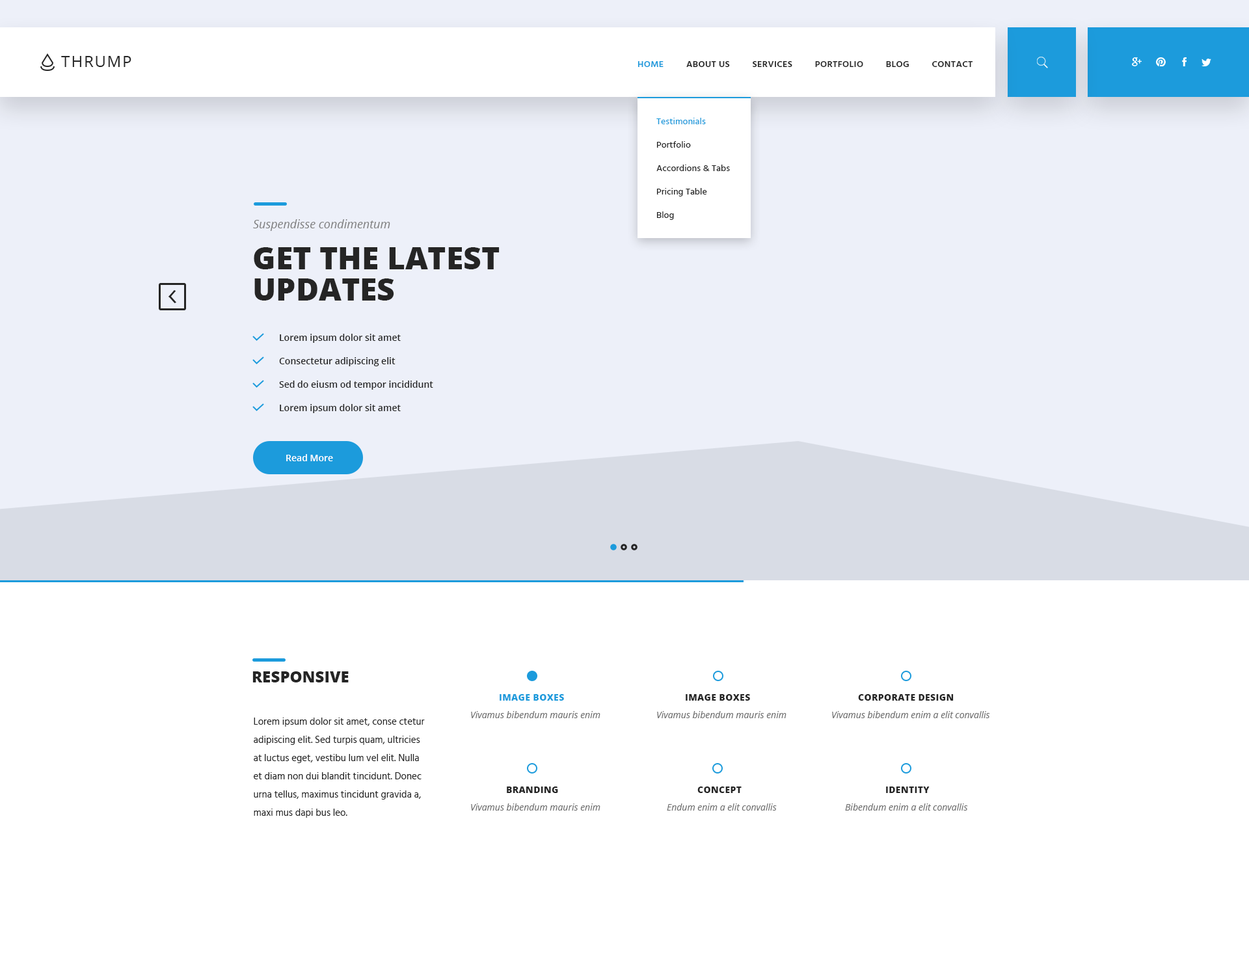
<style>
.page{position:relative;width:1249px;height:955px;background:#ffffff}
.page>*{position:absolute;margin:0}
.t1{font:15.6px "OpenSans";letter-spacing:0.075em;color:#252525;text-transform:uppercase}
.t2{font:9.1px "Hind-Semibold";letter-spacing:0.025em;color:#252525;text-transform:uppercase}
.t3{font:9.1px "Hind-Semibold";letter-spacing:0.025em;color:#1c9bdc;text-transform:uppercase}
.t4{font:9.1px/23.4px "Hind-Medium";color:#252525}
.t5{font:9.1px/23.4px "Hind-Medium";color:#1c9bdc}
.t6{font:11.7px "OpenSans-Italic";color:#7d7d7d}
.t7{font:31.2px/31.2px "OpenSans-Extrabold";color:#252525;text-transform:uppercase}
.t8{font:9.1px/23.4px "OpenSans-Semibold";color:#252525}
.t9{font:9.1px "OpenSans-Semibold";color:#ffffff}
.t10{font:15.6px "OpenSans-Extrabold";color:#252525;text-transform:uppercase}
.t11{font:9.1px "OpenSans-Extrabold";letter-spacing:0.025em;color:#1c9bdc;text-transform:uppercase}
.t12{font:9.1px "OpenSans-Extrabold";letter-spacing:0.025em;color:#252525;text-transform:uppercase}
.t13{font:9.1px "OpenSans-Italic";color:#6f6f6f}
.t14{font:9.8px/18.2px "Hind-Regular";color:#252525}
.t15{font:9.8px/17.6px "Hind-Regular";color:#252525}
</style>
<div class="page">
<p class="t1" style="left:61px;top:56px;width:70px;height:11px">Thrump</p>
<p class="t2" style="left:637px;top:61px;width:336px;height:6px"><span class="t3">Home</span>         About Us         Services         Portfolio         Blog         Contact</p>
<p class="t4" style="left:656px;top:118px;width:74px;height:102px"><span class="t5">Testimonials<br></span>Portfolio<br>Accordions &amp; Tabs<br>Pricing Table<br>Blog</p>
<p class="t6" style="left:253px;top:219px;width:137px;height:12px">Suspendisse condimentum</p>
<p class="t7" style="left:254px;top:247px;width:246px;height:54px">get the latest <br>updates</p>
<p class="t8" style="left:279px;top:334px;width:154px;height:79px">Lorem ipsum dolor sit amet<br>Consectetur adipiscing elit<br>Sed do eiusm od tempor incididunt<br>Lorem ipsum dolor sit amet</p>
<p class="t9" style="left:286px;top:454px;width:47px;height:7px">Read More</p>
<p class="t10" style="left:252px;top:671px;width:97px;height:11px">Responsive</p>
<p class="t11" style="left:500px;top:694px;width:64px;height:7px">image boxes</p>
<p class="t12" style="left:686px;top:694px;width:64px;height:7px">image boxes</p>
<p class="t12" style="left:858px;top:694px;width:96px;height:7px">corporate design</p>
<p class="t13" style="left:471px;top:711px;width:129px;height:7px">Vivamus bibendum mauris enim</p>
<p class="t13" style="left:657px;top:711px;width:129px;height:7px">Vivamus bibendum mauris enim</p>
<p class="t13" style="left:832px;top:711px;width:158px;height:7px">Vivamus bibendum enim a elit convallis</p>
<p class="t14" style="left:254px;top:717px;width:171px;height:101px"><span class="t15">L</span>orem ipsum dolor sit amet, conse ctetur adipiscing elit. Sed turpis quam, ultricies at luctus eget, vestibu lum vel elit. Nulla et diam non dui blandit tincidunt. Donec urna tellus, maximus tincidunt gravida a, maxi mus dapi bus leo.</p>
<p class="t12" style="left:507px;top:786px;width:51px;height:7px">branding</p>
<p class="t12" style="left:697px;top:786px;width:44px;height:7px">concept</p>
<p class="t12" style="left:886px;top:786px;width:43px;height:7px">identity</p>
<p class="t13" style="left:471px;top:803px;width:129px;height:7px">Vivamus bibendum mauris enim</p>
<p class="t13" style="left:667px;top:803px;width:110px;height:7px">Endum enim a elit convallis</p>
<p class="t13" style="left:845px;top:803px;width:123px;height:7px">Bibendum enim a elit convallis</p>
</div>
